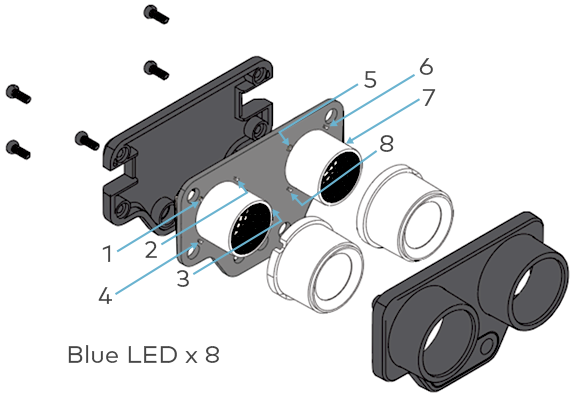
<style>
.page{position:relative;width:575px;height:397px;background:#ffffff}
.page>*{position:absolute;margin:0}
.t1{font:24px "MarkPro";color:#464646;scale:1.05 1}
</style>
<div class="page">
<p class="t1" style="left:419px;top:58px;width:14px;height:17px">6</p>
<p class="t1" style="left:364px;top:71px;width:13px;height:17px">5</p>
<p class="t1" style="left:422px;top:89px;width:14px;height:17px">7</p>
<p class="t1" style="left:380px;top:135px;width:14px;height:17px">8</p>
<p class="t1" style="left:102px;top:245px;width:9px;height:17px">1</p>
<p class="t1" style="left:145px;top:241px;width:12px;height:17px">2</p>
<p class="t1" style="left:177px;top:270px;width:12px;height:17px">3</p>
<p class="t1" style="left:98px;top:287px;width:14px;height:17px">4</p>
<p class="t1" style="left:68px;top:345px;width:151px;height:18px">Blue LED x 8</p>
</div>
